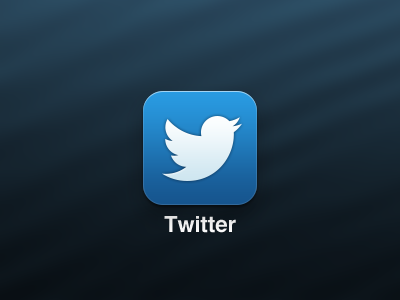
<style>
.page{position:relative;width:400px;height:300px}
.page>*{position:absolute;margin:0}
.t1{font:22px "Helvetica-Bold";color:#ffffff}
</style>
<div class="page">
<p class="t1" style="left:164px;top:216px;width:72px;height:17px">Twitter</p>
</div>
